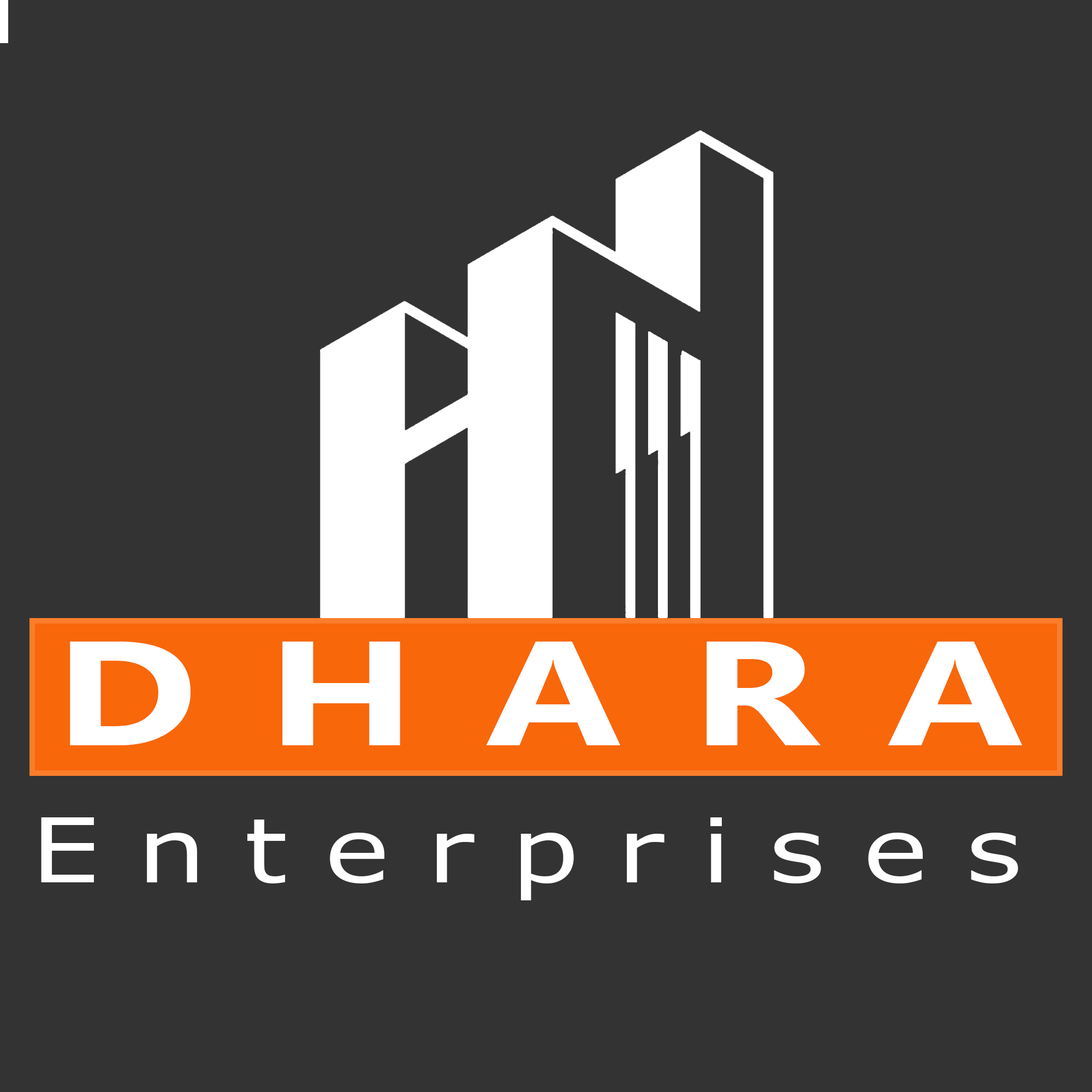
<style>
.page{position:relative;width:1092px;height:1092px;background:#333333}
.page>*{position:absolute;margin:0}
.t1{font:147.9px "Gadugi-Bold";letter-spacing:0.36em;color:#ffffff;scale:1.31 1}
.t2{font:89.2px "MSReferenceSansSerif";letter-spacing:0.34em;color:#ffffff;scale:1.23 1}
</style>
<div class="page">
<p class="t1" style="left:70px;top:642px;width:952px;height:103px">DHARA</p>
<p class="t2" style="left:41px;top:817px;width:977px;height:83px">Enterprises</p>
</div>
